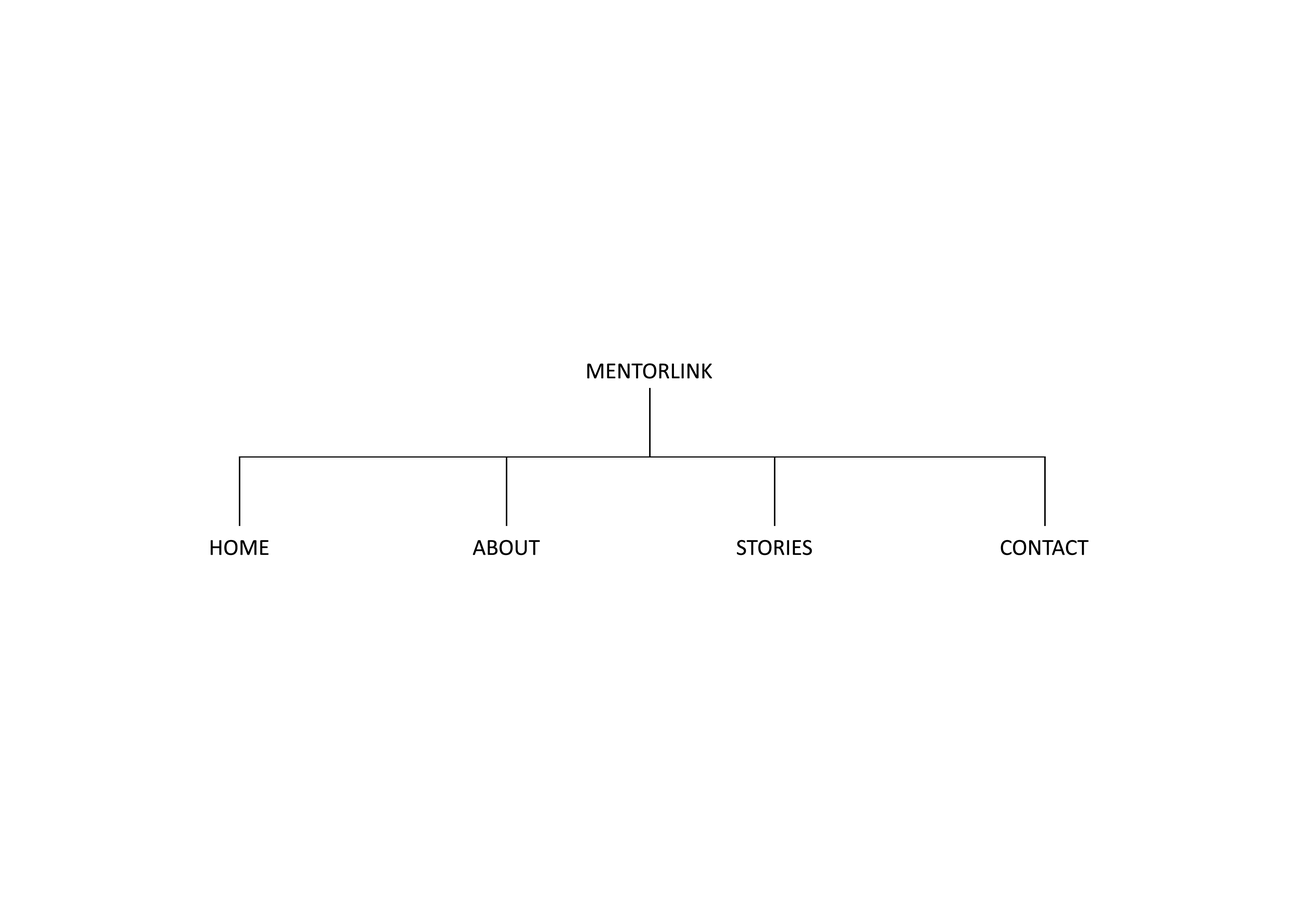
<style>
.page{position:relative;width:1299px;height:918px;background:#ffffff}
.page>*{position:absolute;margin:0}
.t1{font:23.1px "Calibri";color:#000000}
</style>
<div class="page">
<p class="t1" style="left:587px;top:363px;width:125px;height:16px">MENTORLINK</p>
<p class="t1" style="left:211px;top:540px;width:57px;height:15px">HOME</p>
<p class="t1" style="left:473px;top:540px;width:67px;height:15px">ABOUT</p>
<p class="t1" style="left:737px;top:540px;width:75px;height:15px">STORIES</p>
<p class="t1" style="left:1000px;top:540px;width:88px;height:15px">CONTACT</p>
</div>
